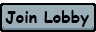
<style>
.page{position:relative;width:96px;height:32px;background:#9badb7}
.page>*{position:absolute;margin:0}
.t1{font:16px "ComicSansMS-Bold";color:#000000}
</style>
<div class="page">
<p class="t1" style="left:5px;top:10px;width:84px;height:17px">Join Lobby</p>
</div>
